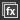
<style>
.page{position:relative;width:20px;height:20px;background:#333333}
.page>*{position:absolute;margin:0}
.t1{font:10px "AdobeHeitiStd-Regular";color:#ffffff}
</style>
<div class="page">
<p class="t1" style="left:6px;top:6px;width:9px;height:9px">fx</p>
</div>
